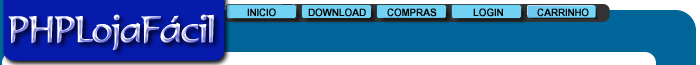
<style>
.page{position:relative;width:700px;height:65px;background:#006699}
.page>*{position:absolute;margin:0}
.t1{font:36px "Formal436BT-Regular";letter-spacing:-0.025em}
.t2{font:10px "Arial-BoldMT";letter-spacing:-0.025em;color:#000000}
</style>
<div class="page">
<p class="t1" style="left:8px;top:14px;width:206px;height:36px">PHPLojaFácil</p>
<p class="t2" style="left:247px;top:8px;width:29px;height:9px">INICIO</p>
<p class="t2" style="left:308px;top:8px;width:58px;height:9px">DOWNLOAD</p>
<p class="t2" style="left:387px;top:8px;width:50px;height:9px">COMPRAS</p>
<p class="t2" style="left:473px;top:8px;width:30px;height:9px">LOGIN</p>
<p class="t2" style="left:537px;top:8px;width:52px;height:9px">CARRINHO</p>
</div>
